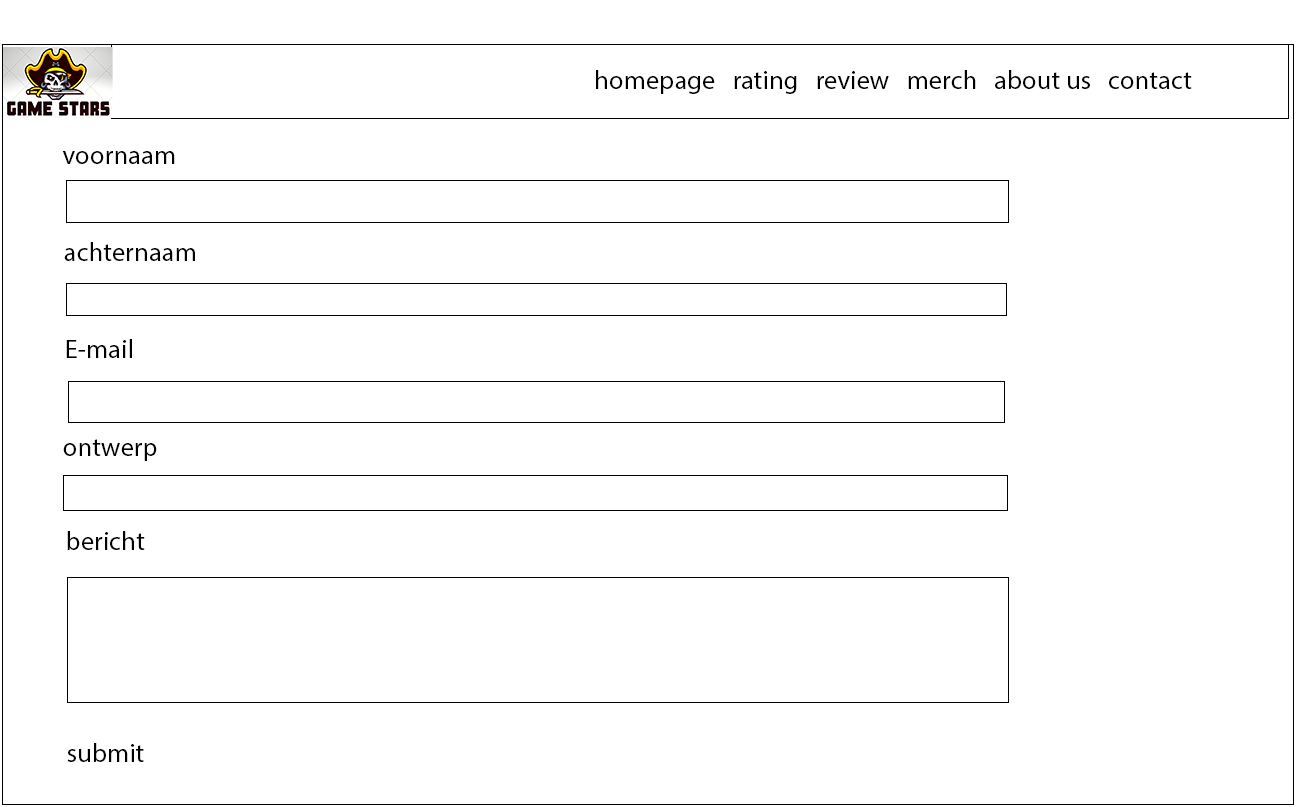
<style>
.page{position:relative;width:1297px;height:807px;background:#ffffff}
.page>*{position:absolute;margin:0}
.t1{font:26.7px "MyriadPro-Regular";color:#000000}
</style>
<div class="page">
<p class="t1" style="left:596px;top:70px;width:596px;height:24px">homepage   rating   review   merch   about us   contact</p>
<p class="t1" style="left:62px;top:151px;width:113px;height:13px">voornaam</p>
<p class="t1" style="left:64px;top:242px;width:131px;height:19px">achternaam</p>
<p class="t1" style="left:66px;top:339px;width:66px;height:19px">E-mail</p>
<p class="t1" style="left:63px;top:439px;width:94px;height:22px">ontwerp</p>
<p class="t1" style="left:67px;top:531px;width:78px;height:19px">bericht</p>
<p class="t1" style="left:67px;top:743px;width:77px;height:19px">submit</p>
</div>
